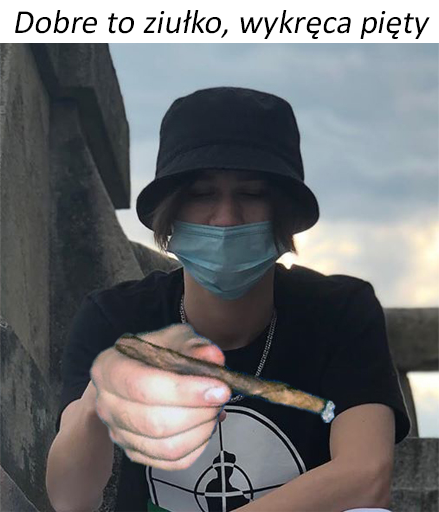
<style>
.page{position:relative;width:439px;height:512px}
.page>*{position:absolute;margin:0}
.t1{font:34px "Calibri";color:#000000;font-style:italic}
</style>
<div class="page">
<p class="t1" style="left:15px;top:10px;width:415px;height:29px">Dobre to ziułko, wykręca pięty</p>
</div>
